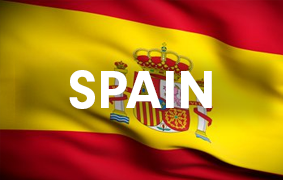
<style>
.page{position:relative;width:283px;height:180px}
.page>*{position:absolute;margin:0}
.t1{font:56px "NeuzeitGro-Bol";color:#ffffff;text-transform:uppercase}
</style>
<div class="page">
<p class="t1" style="left:69px;top:70px;width:143px;height:39px">Spain</p>
</div>
